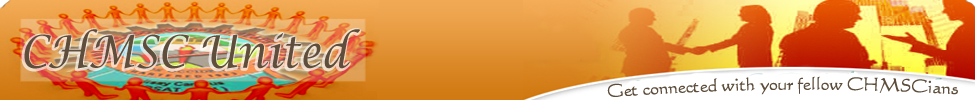
<style>
.page{position:relative;width:975px;height:100px}
.page>*{position:absolute;margin:0}
.t1{font:45px "LucidaCalligraphy-Italic";color:#5e4e3b;scale:0.89 1}
.t2{font:17.5px "Calligraphic421BT-RomanB";color:#5d4d3a}
</style>
<div class="page">
<p class="t1" style="left:24px;top:29px;width:337px;height:40px">CHMSC United</p>
<p class="t2" style="left:607px;top:76px;width:351px;height:21px">Get connected with your fellow CHMSCians</p>
</div>
